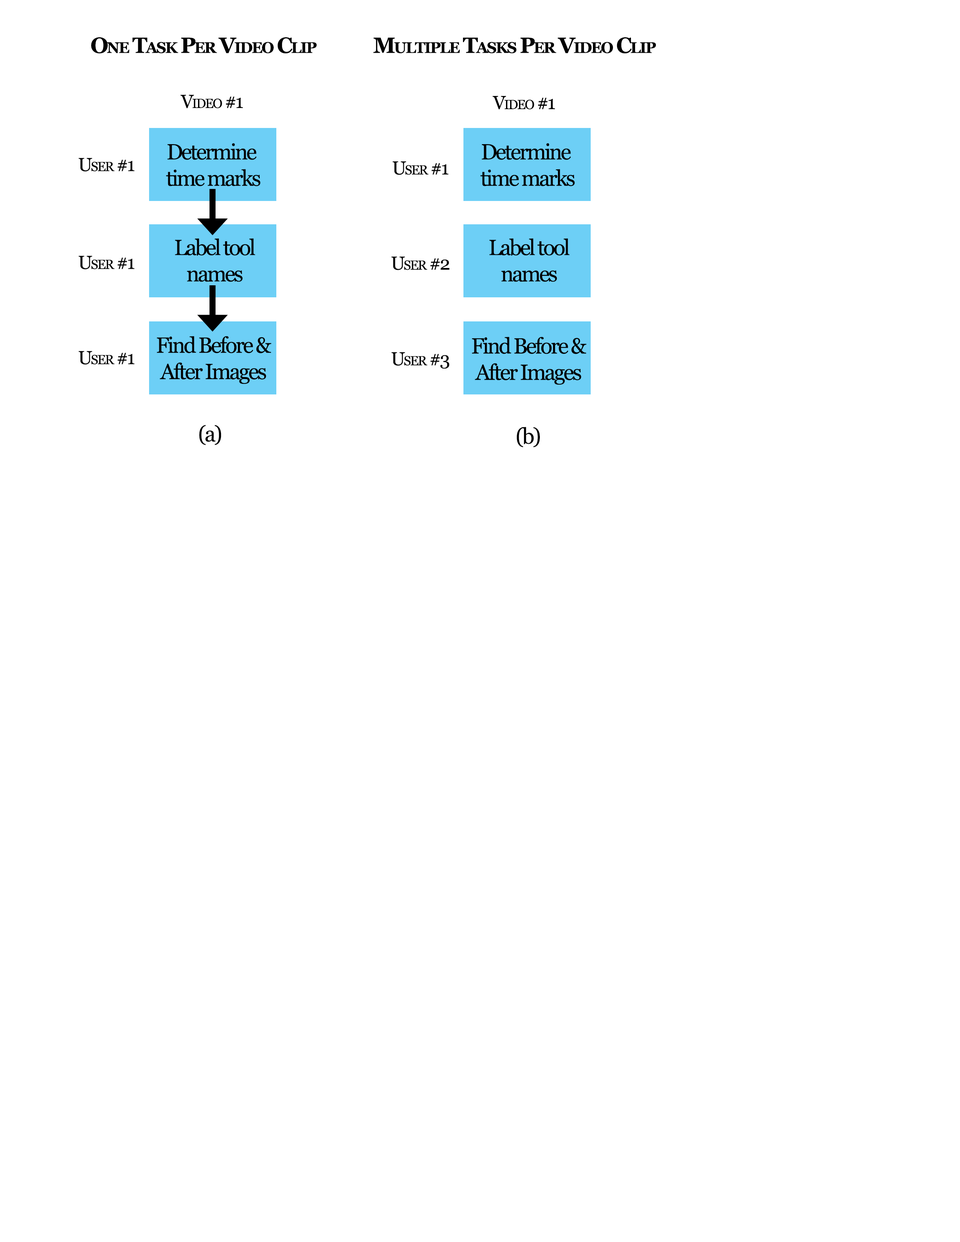
<style>
.page{position:relative;width:960px;height:1242px;background:#ffffff}
.page>*{position:absolute;margin:0}
.t1{font:22px "Georgia-Bold";letter-spacing:-0.075em;color:#000000;font-variant:small-caps}
.t2{font:18.8px "Georgia";letter-spacing:-0.075em;color:#000000;font-variant:small-caps}
.t3{font:22px "Georgia";letter-spacing:-0.075em;color:#000000}
</style>
<div class="page">
<p class="t1" style="left:91px;top:37px;width:226px;height:16px">One Task Per Video Clip</p>
<p class="t1" style="left:373px;top:37px;width:283px;height:16px">Multiple Tasks Per Video Clip</p>
<p class="t2" style="left:180px;top:95px;width:63px;height:13px">Video #1</p>
<p class="t2" style="left:492px;top:96px;width:63px;height:14px">Video #1</p>
<p class="t3" style="left:166px;top:143px;width:94px;height:43px;text-align:center">Determine <br>time marks</p>
<p class="t3" style="left:480px;top:143px;width:95px;height:43px;text-align:center">Determine <br>time marks</p>
<p class="t2" style="left:79px;top:158px;width:55px;height:14px">User #1</p>
<p class="t2" style="left:393px;top:161px;width:55px;height:14px">User #1</p>
<p class="t3" style="left:175px;top:238px;width:80px;height:44px;text-align:center">Label tool<br>names</p>
<p class="t3" style="left:489px;top:238px;width:81px;height:44px;text-align:center">Label tool<br>names</p>
<p class="t2" style="left:79px;top:256px;width:55px;height:14px">User #1</p>
<p class="t2" style="left:391px;top:256px;width:58px;height:14px">User #2</p>
<p class="t3" style="left:157px;top:336px;width:114px;height:48px;text-align:center">Find Before &amp;<br>After Images</p>
<p class="t3" style="left:472px;top:337px;width:114px;height:48px;text-align:center">Find Before &amp;<br>After Images</p>
<p class="t2" style="left:79px;top:351px;width:55px;height:14px">User #1</p>
<p class="t2" style="left:391px;top:352px;width:58px;height:17px">User #3</p>
<p class="t3" style="left:199px;top:425px;width:22px;height:20px">(a)</p>
<p class="t3" style="left:516px;top:427px;width:24px;height:21px">(b)</p>
</div>
